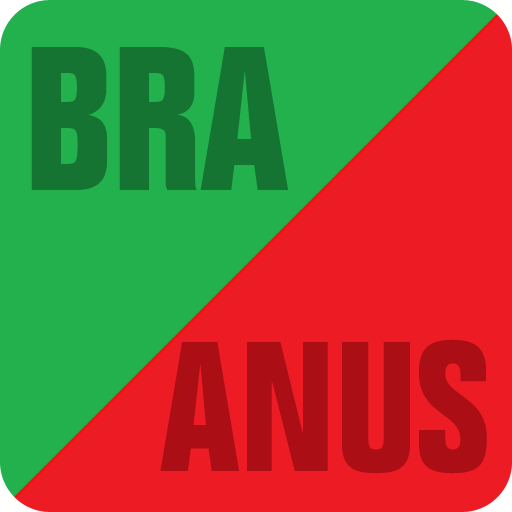
<style>
.page{position:relative;width:512px;height:512px;background:#22b14c}
.page>*{position:absolute;margin:0}
.t1{font:200px "Folio-BoldCondensed";color:#167432}
.t2{font:180px "Folio-BoldCondensed";color:#ab0e15}
</style>
<div class="page">
<p class="t1" style="left:31px;top:47px;width:257px;height:143px">BRA</p>
<p class="t2" style="left:160px;top:339px;width:327px;height:135px">ANUS</p>
</div>
